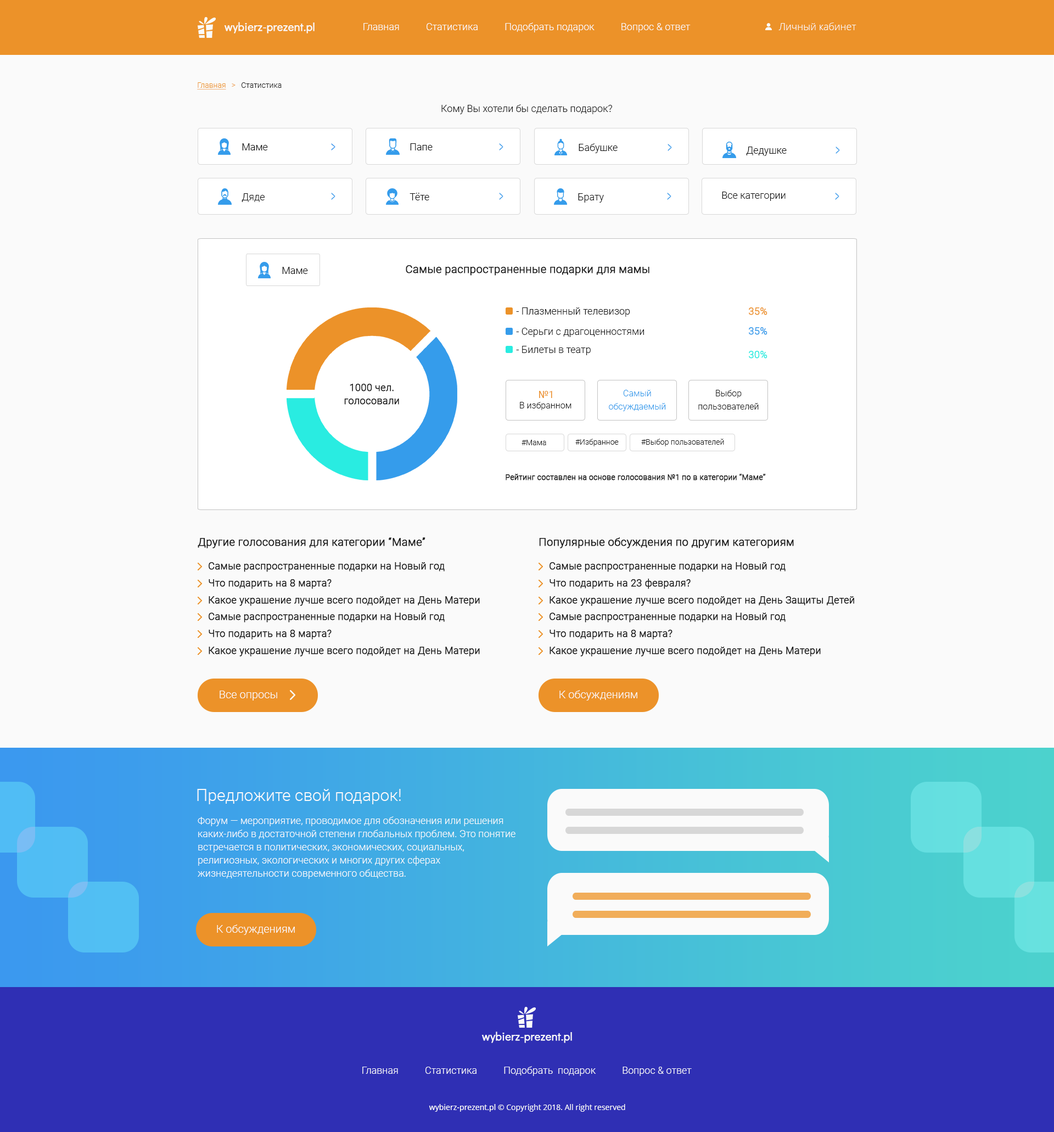
<style>
.page{position:relative;width:1054px;height:1132px;background:#fafafa}
.page>*{position:absolute;margin:0}
.t1{font:11px "DidactGothic-Regular";color:#fafafa;font-weight:bold}
.t2{font:9.9px "Roboto-Light";color:#fafafa}
.t3{font:9.9px "OpenSans-Light";color:#fafafa}
.t4{font:7.7px "Roboto-Light";color:#1b1b1b}
.t5{font:7.7px "Roboto-Light";color:#ec9229;text-decoration:underline}
.t6{font:7.7px "Roboto-Light";color:#ec9229}
.t7{font:9.9px "Roboto-Light";color:#191919}
.t8{font:9.9px "Roboto-Light";color:#0e0e0e}
.t9{font:17.5px "Roboto-Light";color:#3b9aee;scale:0.5 1}
.t10{font:17.5px "Roboto-Light";color:#359ceb;scale:0.48 1}
.t11{font:11px "Roboto-Light";color:#191919;font-weight:bold}
.t12{font:9.9px "Roboto-Light";color:#141414}
.t13{font:9.9px "Roboto-Light";color:#ec9229;font-weight:bold}
.t14{font:9.9px "Roboto-Light";color:#359ceb;font-weight:bold}
.t15{font:9.9px "Roboto-Light";color:#29ece1;font-weight:bold}
.t16{font:9.9px/13.2px "Roboto-Light";color:#171717;font-weight:bold}
.t17{font:8.8px/13.2px "Roboto-Light";color:#359ceb}
.t18{font:8.8px/13.2px "Roboto-Light";color:#1d1d1d}
.t19{font:8.8px "Roboto-Light";color:#171717}
.t20{font:9.9px "Roboto-Regular";color:#ec9229}
.t21{font:7.7px "Roboto-Light";color:#191919}
.t22{font:7.7px "Roboto-Light";color:#191919;font-weight:bold}
.t23{font:11px "Roboto-Light";color:#171717;font-weight:bold}
.t24{font:9.9px "Roboto-Light";color:#171717;font-weight:bold}
.t25{font:11px "Roboto-Light";color:#fafafa}
.t26{font:16.5px "Roboto-Light";color:#fafafa}
.t27{font:9.9px/13.2px "Roboto-Light";color:#fafafa}
.t28{font:7.7px "OpenSans-Regular";color:#fafafa}
.t29{font:7.7px "NotoSans";color:#fafafa}
</style>
<div class="page">
<p class="t1" style="left:224px;top:22px;width:90px;height:11px">wybierz-prezent.pl</p>
<p class="t2" style="left:363px;top:23px;width:327px;height:9px">Главная           Статистика           Подобрать подарок           Вопрос &amp; ответ</p>
<p class="t3" style="left:778px;top:23px;width:78px;height:7px">Личный кабинет</p>
<p class="t4" style="left:197px;top:82px;width:85px;height:8px"><span class="t5">Главная   </span><span class="t6">&gt;   </span>Статистика</p>
<p class="t7" style="left:441px;top:104px;width:171px;height:10px">Кому Вы хотели бы сделать подарок?</p>
<p class="t8" style="left:242px;top:143px;width:26px;height:7px">Маме</p>
<p class="t9" style="left:331px;top:143px;width:4px;height:7px">&gt;</p>
<p class="t8" style="left:410px;top:143px;width:22px;height:7px">Папе</p>
<p class="t10" style="left:499px;top:143px;width:4px;height:7px">&gt;</p>
<p class="t8" style="left:578px;top:143px;width:39px;height:10px">Бабушке</p>
<p class="t10" style="left:667px;top:144px;width:5px;height:7px">&gt;</p>
<p class="t8" style="left:746px;top:147px;width:40px;height:9px">Дедушке</p>
<p class="t10" style="left:835px;top:147px;width:5px;height:7px">&gt;</p>
<p class="t8" style="left:241px;top:193px;width:24px;height:9px">Дяде</p>
<p class="t10" style="left:331px;top:193px;width:4px;height:7px">&gt;</p>
<p class="t8" style="left:409px;top:193px;width:20px;height:7px">Тёте</p>
<p class="t10" style="left:499px;top:193px;width:4px;height:7px">&gt;</p>
<p class="t8" style="left:578px;top:193px;width:26px;height:10px">Брату</p>
<p class="t10" style="left:667px;top:193px;width:4px;height:7px">&gt;</p>
<p class="t8" style="left:722px;top:192px;width:63px;height:9px">Все категории</p>
<p class="t10" style="left:835px;top:193px;width:4px;height:7px">&gt;</p>
<p class="t8" style="left:282px;top:267px;width:26px;height:7px">Маме</p>
<p class="t11" style="left:406px;top:265px;width:243px;height:11px">Самые распространенные подарки для мамы</p>
<p class="t12" style="left:516px;top:307px;width:114px;height:10px">- Плазменный телевизор</p>
<p class="t13" style="left:749px;top:307px;width:18px;height:8px">35%</p>
<p class="t12" style="left:516px;top:328px;width:128px;height:9px">- Серьги с драгоценностями</p>
<p class="t14" style="left:749px;top:327px;width:18px;height:8px">35%</p>
<p class="t12" style="left:516px;top:346px;width:75px;height:9px">- Билеты в театр</p>
<p class="t15" style="left:749px;top:351px;width:18px;height:7px">30%</p>
<p class="t16" style="left:344px;top:384px;width:55px;height:20px;text-align:center">1000 чел.<br>голосовали</p>
<p class="t17" style="left:609px;top:390px;width:57px;height:21px;text-align:center">Самый<br>обсуждаемый</p>
<p class="t18" style="left:698px;top:390px;width:60px;height:19px;text-align:center">Выбор<br>пользователей</p>
<p class="t19" style="left:520px;top:402px;width:51px;height:8px">В избранном</p>
<p class="t20" style="left:539px;top:391px;width:13px;height:7px">№1</p>
<p class="t21" style="left:521px;top:440px;width:25px;height:5px">#Мама</p>
<p class="t21" style="left:575px;top:438px;width:44px;height:8px">#Избранное</p>
<p class="t21" style="left:641px;top:438px;width:83px;height:8px">#Выбор пользователей</p>
<p class="t22" style="left:505px;top:474px;width:261px;height:8px">Рейтинг составлен на основе голосования №1 по в категории “Маме”</p>
<p class="t23" style="left:198px;top:537px;width:227px;height:11px">Другие голосования для категории “Маме”</p>
<p class="t23" style="left:539px;top:537px;width:255px;height:11px">Популярные обсуждения по другим категориям</p>
<p class="t24" style="left:209px;top:562px;width:236px;height:10px">Самые распространенные подарки на Новый год</p>
<p class="t24" style="left:549px;top:562px;width:236px;height:10px">Самые распространенные подарки на Новый год</p>
<p class="t24" style="left:209px;top:579px;width:122px;height:10px">Что подарить на 8 марта?</p>
<p class="t24" style="left:549px;top:578px;width:141px;height:11px">Что подарить на 23 февраля?</p>
<p class="t24" style="left:209px;top:596px;width:271px;height:10px">Какое украшение лучше всего подойдет на День Матери</p>
<p class="t24" style="left:549px;top:596px;width:305px;height:10px">Какое украшение лучше всего подойдет на День Защиты Детей</p>
<p class="t24" style="left:209px;top:612px;width:236px;height:10px">Самые распространенные подарки на Новый год</p>
<p class="t24" style="left:549px;top:612px;width:236px;height:10px">Самые распространенные подарки на Новый год</p>
<p class="t24" style="left:209px;top:629px;width:122px;height:10px">Что подарить на 8 марта?</p>
<p class="t24" style="left:549px;top:629px;width:123px;height:10px">Что подарить на 8 марта?</p>
<p class="t24" style="left:209px;top:646px;width:271px;height:10px">Какое украшение лучше всего подойдет на День Матери</p>
<p class="t24" style="left:549px;top:646px;width:271px;height:10px">Какое украшение лучше всего подойдет на День Матери</p>
<p class="t25" style="left:559px;top:690px;width:78px;height:10px">К обсуждениям</p>
<p class="t25" style="left:220px;top:690px;width:57px;height:10px">Все опросы</p>
<p class="t26" style="left:197px;top:789px;width:204px;height:15px">Предложите свой подарок!</p>
<p class="t27" style="left:198px;top:816px;width:317px;height:63px;text-align:right">Форум — мероприятие, проводимое для обозначения или решения каких-либо в достаточной степени глобальных проблем. Это понятие встречается в политических, экономических, социальных, религиозных, экологических и многих других сферах жизнедеятельности современного общества.</p>
<p class="t25" style="left:217px;top:924px;width:78px;height:11px">К обсуждениям</p>
<p class="t1" style="left:481px;top:1031px;width:91px;height:12px">wybierz-prezent.pl</p>
<p class="t2" style="left:362px;top:1066px;width:330px;height:10px">Главная           Статистика           Подобрать  подарок           Вопрос &amp; ответ</p>
<p class="t28" style="left:429px;top:1104px;width:196px;height:7px"><span class="t29">wybierz-prezent.pl </span>© Copyright 2018. All right reserved</p>
</div>
